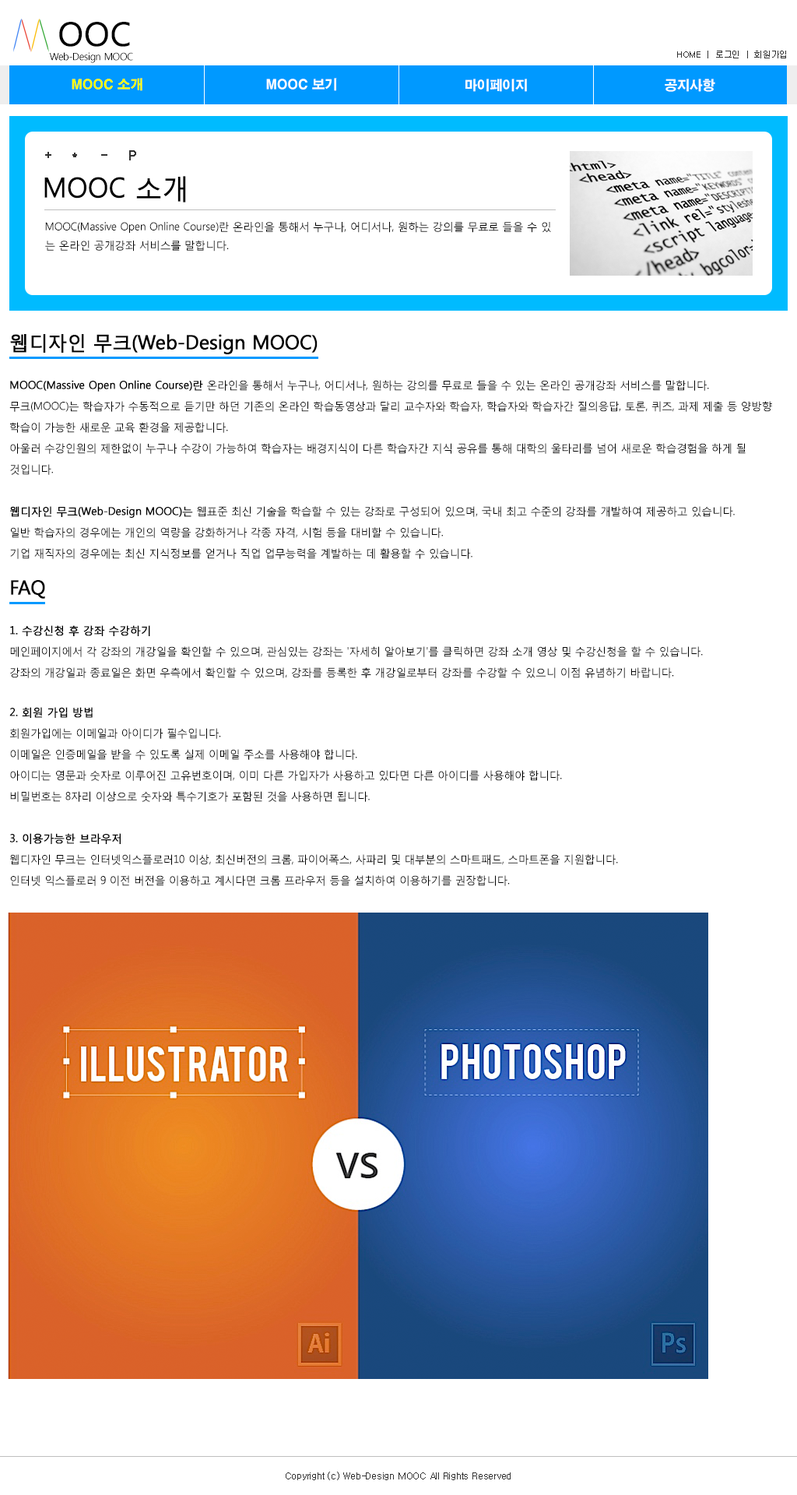
<style>
.page{position:relative;width:797px;height:1495px;background:#ffffff}
.page>*{position:absolute;margin:0}
.t1{font:32.7px "MalgunGothicRegular";color:#000000;font-weight:bold}
.t2{font:10.1px "MalgunGothicRegular";letter-spacing:-0.04em;color:#000000}
.t3{font:8.6px "Dotum";letter-spacing:-0.02em;color:#333333}
.t4{font:13.2px "H2gtrE";letter-spacing:-0.02em;color:#ffff00}
.t5{font:13.2px "H2gtrE";letter-spacing:-0.02em;color:#ffffff}
.t6{font:13.2px "Dotum";letter-spacing:-0.02em;color:#333333;font-weight:bold}
.t7{font:27.3px "MalgunGothicRegular";letter-spacing:-0.02em;color:#000000;font-weight:bold}
.t8{font:10.9px/18.7px "MalgunGothicRegular";letter-spacing:-0.02em;color:#000000}
.t9{font:10.9px/21px "MalgunGothicRegular";letter-spacing:-0.02em;color:#000000}
.t10{font:19.5px/18.7px "MalgunGothicRegular";letter-spacing:-0.02em;color:#000000;font-weight:bold}
.t11{font:10.9px/21px "MalgunGothicRegular";letter-spacing:-0.02em;color:#000000;font-weight:bold}
.t12{font:9.3px "Dotum";letter-spacing:-0.02em;color:#333333}
</style>
<div class="page">
<p class="t1" style="left:59px;top:22px;width:71px;height:25px">OOC</p>
<p class="t2" style="left:49px;top:52px;width:84px;height:11px">Web-Design MOOC</p>
<p class="t3" style="left:678px;top:51px;width:109px;height:7px">HOME  |  로그인  |  회원가입</p>
<p class="t4" style="left:72px;top:78px;width:71px;height:13px">MOOC 소개</p>
<p class="t5" style="left:266px;top:78px;width:71px;height:13px">MOOC 보기</p>
<p class="t5" style="left:466px;top:79px;width:61px;height:13px">마이페이지</p>
<p class="t5" style="left:665px;top:79px;width:51px;height:13px">공지사항</p>
<p class="t6" style="left:45px;top:150px;width:91px;height:10px">+ * - P</p>
<p class="t7" style="left:44px;top:176px;width:142px;height:26px">MOOC 소개</p>
<p class="t8" style="left:45px;top:222px;width:506px;height:30px">MOOC(Massive Open Online Course)란 온라인을 통해서 누구나, 어디서나, 원하는 강의를 무료로 들을 수 있<br>는 온라인 공개강좌 서비스를 말합니다.</p>
<p class="t9" style="left:9px;top:334px;width:764px;height:552px"><span class="t10">웹디자인 무크(Web-Design MOOC)<br><br></span><span class="t11">MOOC(Massive Open Online Course)란</span> 온라인을 통해서 누구나, 어디서나, 원하는 강의를 무료로 들을 수 있는 온라인 공개강좌 서비스를 말합니다.<br>무크(MOOC)는 학습자가 수동적으로 듣기만 하던 기존의 온라인 학습동영상과 달리 교수자와 학습자, 학습자와 학습자간 질의응답, 토론, 퀴즈, 과제 제출 등 양방향 학습이 가능한 새로운 교육 환경을 제공합니다. <br>아울러 수강인원의 제한없이 누구나 수강이 가능하여 학습자는 배경지식이 다른 학습자간 지식 공유를 통해 대학의 울타리를 넘어 새로운 학습경험을 하게 될 것입니다.<br><br><span class="t11">웹디자인 무크(Web-Design MOOC)는</span> 웹표준 최신 기술을 학습할 수 있는 강좌로 구성되어 있으며, 국내 최고 수준의 강좌를 개발하여 제공하고 있습니다. <br>일반 학습자의 경우에는 개인의 역량을 강화하거나 각종 자격, 시험 등을 대비할 수 있습니다. <br>기업 재직자의 경우에는 최신 지식정보를 얻거나 직업 업무능력을 계발하는 데 활용할 수 있습니다.<br><br><span class="t10">FAQ<br><br></span><span class="t11">1. 수강신청 후 강좌 수강하기<br></span>메인페이지에서 각 강좌의 개강일을 확인할 수 있으며, 관심있는 강좌는 '자세히 알아보기'를 클릭하면 강좌 소개 영상 및 수강신청을 할 수 있습니다.<br>강좌의 개강일과 종료일은 화면 우측에서 확인할 수 있으며, 강좌를 등록한 후 개강일로부터 강좌를 수강할 수 있으니 이점 유념하기 바랍니다.<br><br><span class="t11">2. 회원 가입 방법<br></span>회원가입에는 이메일과 아이디가 필수입니다.<br>이메일은 인증메일을 받을 수 있도록 실제 이메일 주소를 사용해야 합니다.<br>아이디는 영문과 숫자로 이루어진 고유번호이며, 이미 다른 가입자가 사용하고 있다면 다른 아이디를 사용해야 합니다.<br>비밀번호는 8자리 이상으로 숫자와 특수기호가 포함된 것을 사용하면 됩니다.<br><br><span class="t11">3. 이용가능한 브라우저<br></span>웹디자인 무크는 인터넷익스플로러10 이상, 최신버전의 크롬, 파이어폭스, 사파리 및 대부분의 스마트패드, 스마트폰을 지원합니다.<br>인터넷 익스플로러 9 이전 버전을 이용하고 계시다면 크롬 프라우저 등을 설치하여 이용하기를 권장합니다.</p>
<p class="t12" style="left:286px;top:1472px;width:225px;height:8px">Copyright (c) Web-Design MOOC All Rights Reserved</p>
</div>
